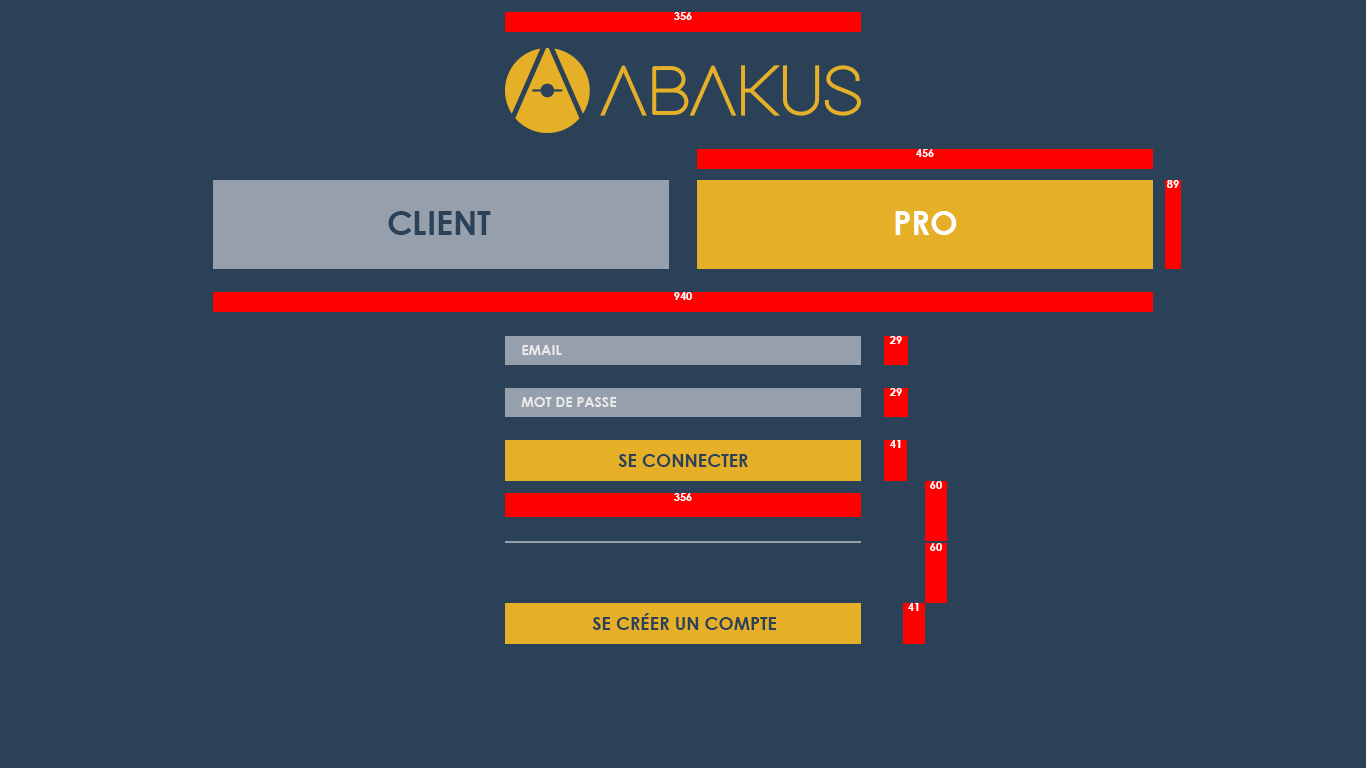
<style>
.page{position:relative;width:1366px;height:768px;background:#2a4158}
.page>*{position:absolute;margin:0}
.t1{font:11px "CenturyGothic-Bold";color:#ffffff;text-transform:uppercase}
.t2{font:32.7px "CenturyGothic-Bold";color:#2a4158;text-transform:uppercase}
.t3{font:32.7px "CenturyGothic-Bold";color:#ffffff;text-transform:uppercase}
.t4{font:14px "CenturyGothic-Bold";color:#eae9e9;text-transform:uppercase}
.t5{font:18px "CenturyGothic-Bold";color:#2a4158;text-transform:uppercase}
</style>
<div class="page">
<p class="t1" style="left:674px;top:12px;width:18px;height:8px">356</p>
<p class="t1" style="left:916px;top:149px;width:18px;height:8px">456</p>
<p class="t1" style="left:1167px;top:180px;width:12px;height:8px">89</p>
<p class="t2" style="left:388px;top:211px;width:103px;height:24px">Client</p>
<p class="t3" style="left:895px;top:211px;width:62px;height:24px">Pro</p>
<p class="t1" style="left:674px;top:292px;width:18px;height:8px">940</p>
<p class="t1" style="left:889px;top:336px;width:13px;height:8px">29</p>
<p class="t4" style="left:522px;top:345px;width:40px;height:10px">Email</p>
<p class="t1" style="left:889px;top:388px;width:13px;height:8px">29</p>
<p class="t4" style="left:521px;top:397px;width:95px;height:10px">Mot de passe</p>
<p class="t1" style="left:890px;top:440px;width:11px;height:8px">41</p>
<p class="t5" style="left:618px;top:454px;width:130px;height:13px">Se Connecter</p>
<p class="t1" style="left:930px;top:481px;width:12px;height:8px">60</p>
<p class="t1" style="left:674px;top:493px;width:18px;height:8px">356</p>
<p class="t1" style="left:930px;top:543px;width:12px;height:8px">60</p>
<p class="t1" style="left:908px;top:603px;width:11px;height:8px">41</p>
<p class="t5" style="left:592px;top:613px;width:184px;height:17px">Se créer un compte</p>
</div>
